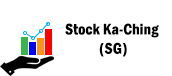
<style>
.page{position:relative;width:172px;height:76px;background:#ffffff}
.page>*{position:absolute;margin:0}
.t1{font:16px "FranklinGothic-DemiCond";color:#000000}
</style>
<div class="page">
<p class="t1" style="left:65px;top:23px;width:94px;height:34px;text-align:center">Stock Ka-Ching<br> (SG)</p>
</div>
